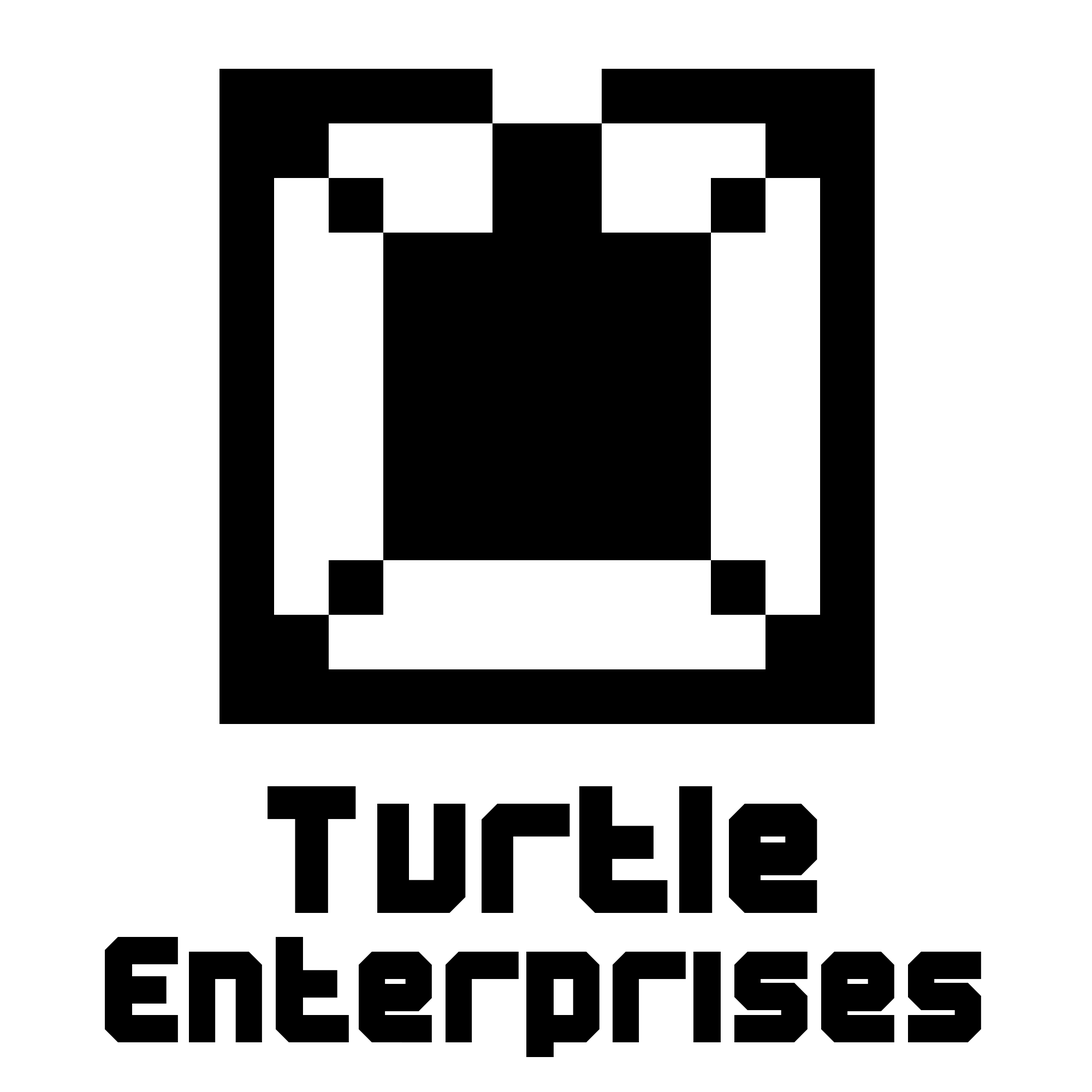
<style>
.page{position:relative;width:1092px;height:1092px;background:#ffffff}
.page>*{position:absolute;margin:0}
.t1{font:145.8px/129.4px "BNMachine";letter-spacing:0.05em;color:#000000}
.t2{font:175.8px/129.4px "BNMachine";letter-spacing:0.05em;color:#000000}
</style>
<div class="page">
<p class="t1" style="left:105px;top:786px;width:876px;height:271px;text-align:center"><span class="t2">Turtle<br></span>Enterprises</p>
</div>
